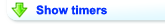
<style>
.page{position:relative;width:165px;height:24px;background:#ffffff}
.page>*{position:absolute;margin:0}
.t1{font:12px "Arial-BoldMT";color:#0531ff}
</style>
<div class="page">
<p class="t1" style="left:36px;top:5px;width:71px;height:10px">Show timers</p>
</div>
